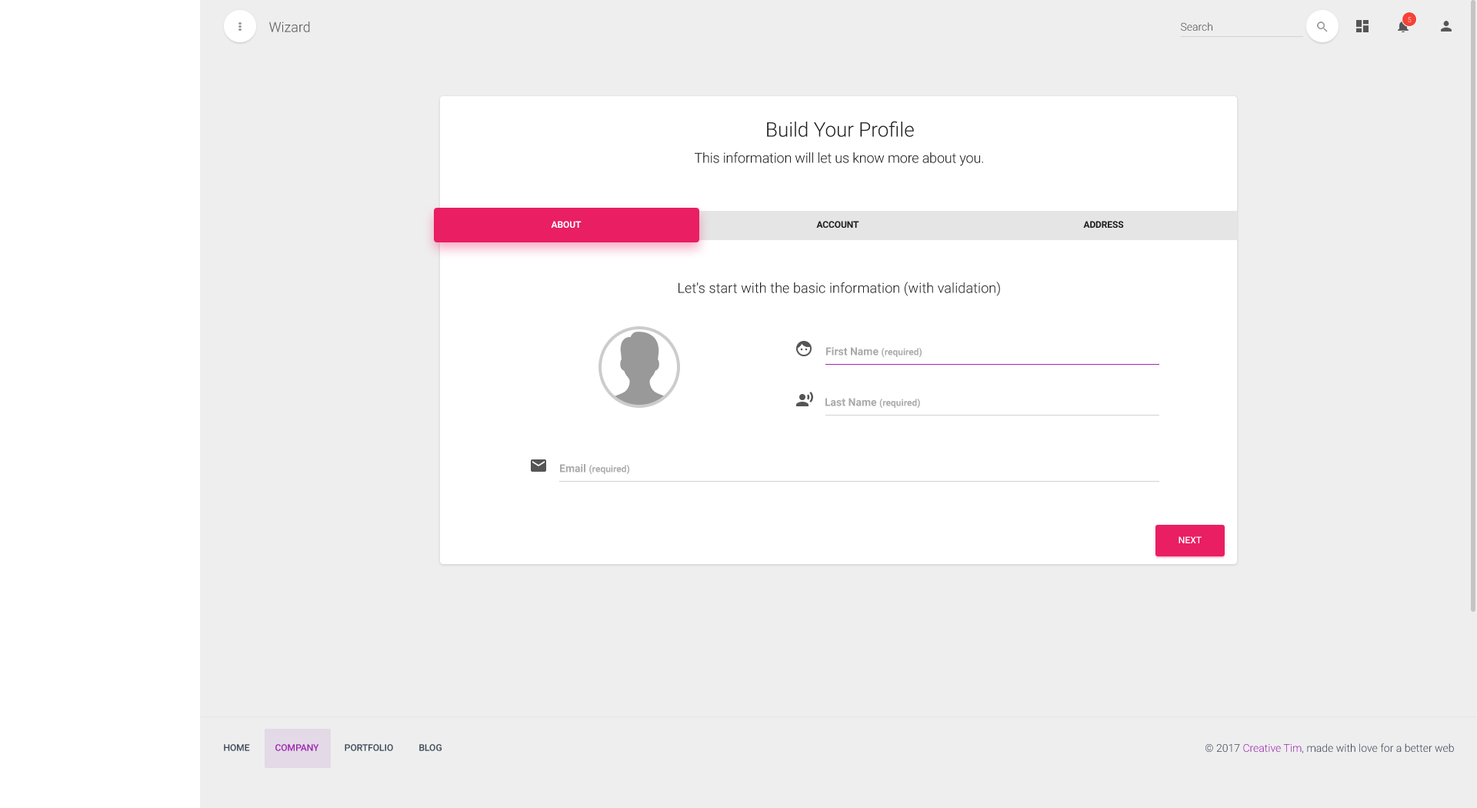
<style>
.page{position:relative;width:1477px;height:808px;background:#eeeeee}
.page>*{position:absolute;margin:0}
.t1{font:6.9px "Roboto-Light"}
.t2{font:13.8px "Roboto-Light";color:#555555}
.t3{font:10.8px "Roboto-Light";color:#555555}
.t4{font:20px "Roboto-Light";color:#212121}
.t5{font:13.8px "Roboto-Light";letter-spacing:-0.01em;color:#212121}
.t6{font:9.2px "Roboto-Bold";letter-spacing:-0.01em;color:#ffffff}
.t7{font:9.2px "Roboto-Bold";letter-spacing:-0.01em;color:#1f1f1f}
.t8{font:13.8px "Roboto-Light";letter-spacing:0.005em;color:#212121}
.t9{font:10.8px "Roboto-Bold";color:#aaaaaa}
.t10{font:9.2px "Roboto-Bold";color:#aaaaaa}
.t11{font:9.2px "Roboto-Medium";color:#ffffff}
.t12{font:9.2px "Roboto-Medium";color:#3c4858}
.t13{font:9.2px "Roboto-Medium";color:#9c27b0}
.t14{font:10.8px "Roboto-Light";color:#3c4858}
.t15{font:10.8px "Roboto-Light";color:#9c27b0}
</style>
<div class="page">
<p class="t1" style="left:1407px;top:17px;width:4px;height:5px">5</p>
<p class="t2" style="left:269px;top:22px;width:41px;height:10px">Wizard</p>
<p class="t3" style="left:1181px;top:22px;width:31px;height:9px">Search</p>
<p class="t4" style="left:767px;top:121px;width:147px;height:16px">Build Your Profile</p>
<p class="t5" style="left:694px;top:152px;width:289px;height:14px">This information will let us know more about you.</p>
<p class="t6" style="left:551px;top:221px;width:30px;height:7px">ABOUT</p>
<p class="t7" style="left:816px;top:221px;width:43px;height:7px">ACCOUNT</p>
<p class="t7" style="left:1083px;top:221px;width:41px;height:7px">ADDRESS</p>
<p class="t8" style="left:678px;top:281px;width:322px;height:15px">Let's start with the basic information (with validation)</p>
<p class="t9" style="left:826px;top:347px;width:95px;height:11px">First Name <span class="t10">(required)</span></p>
<p class="t10" style="left:825px;top:398px;width:95px;height:10px"><span class="t9">Last Name </span>(required)</p>
<p class="t10" style="left:560px;top:464px;width:69px;height:11px"><span class="t9">Email </span>(required)</p>
<p class="t11" style="left:1178px;top:536px;width:23px;height:7px">NEXT</p>
<p class="t12" style="left:224px;top:744px;width:26px;height:7px">HOME</p>
<p class="t13" style="left:275px;top:744px;width:44px;height:7px">COMPANY</p>
<p class="t12" style="left:345px;top:744px;width:48px;height:7px">PORTFOLIO</p>
<p class="t12" style="left:419px;top:744px;width:22px;height:7px">BLOG</p>
<p class="t14" style="left:1205px;top:743px;width:249px;height:10px">© 2017 <span class="t15">Creative Tim</span>, made with love for a better web</p>
</div>
